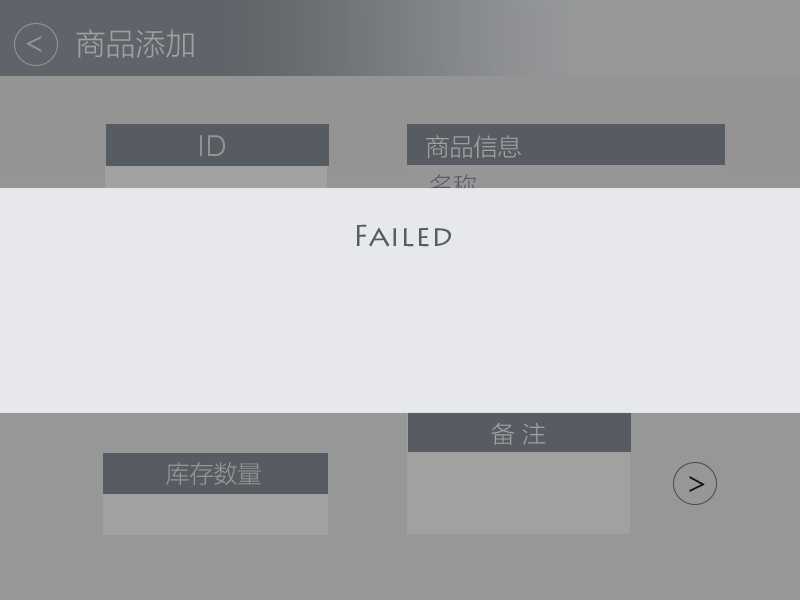
<style>
.page{position:relative;width:800px;height:600px;background:#e6e8ec}
.page>*{position:absolute;margin:0}
.t1{font:30px "MicrosoftYaHeiLight";color:#a1a1a1}
.t2{font:30px "SofiaProLight";color:#939393}
.t3{font:24px "MicrosoftYaHeiLight";color:#a1a1a1}
.t4{font:24px "MicrosoftYaHeiLight";color:#565c62}
.t5{font:23.6px "MicrosoftYaHeiLight";color:#a1a1a1}
.t6{font:24px "MicrosoftYaHeiLight";color:#969696}
</style>
<div class="page">
<p class="t1" style="left:76px;top:29px;width:118px;height:29px">商品添加</p>
<p class="t2" style="left:200px;top:135px;width:25px;height:21px">ID</p>
<p class="t3" style="left:426px;top:135px;width:95px;height:23px">商品信息</p>
<p class="t4" style="left:429px;top:174px;width:48px;height:23px">名称</p>
<p class="t5" style="left:491px;top:422px;width:55px;height:23px">备 注</p>
<p class="t6" style="left:166px;top:462px;width:95px;height:23px">库存数量</p>
</div>
